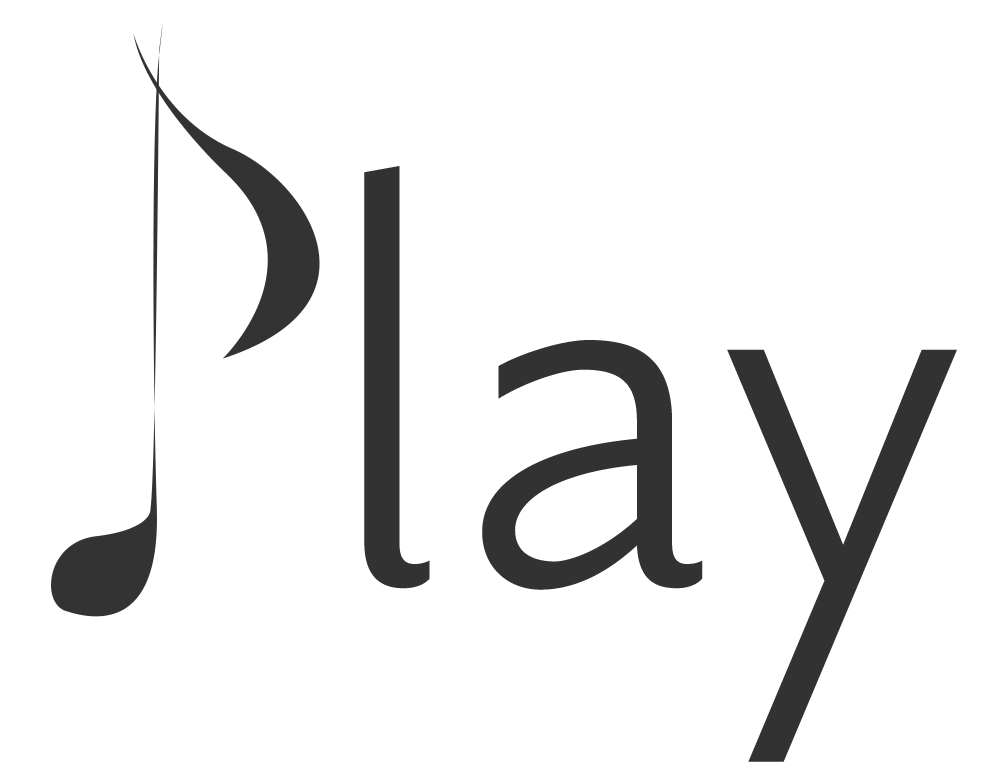
<style>
.page{position:relative;width:1000px;height:775px;background:#ffffff}
.page>*{position:absolute;margin:0}
.t1{font:685.3px "MrEavesSanOT-Book";color:#323232}
</style>
<div class="page">
<p class="t1" style="left:55px;top:166px;width:902px;height:596px">Play</p>
</div>
